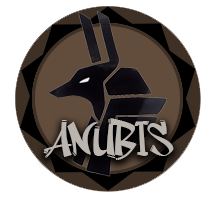
<style>
.page{position:relative;width:216px;height:198px;background:#ffffff}
.page>*{position:absolute;margin:0}
.t1{font:46.8px "Rhieknuza";color:#bcb5af}
</style>
<div class="page">
<p class="t1" style="left:43px;top:118px;width:131px;height:42px">ANUBIS</p>
</div>
